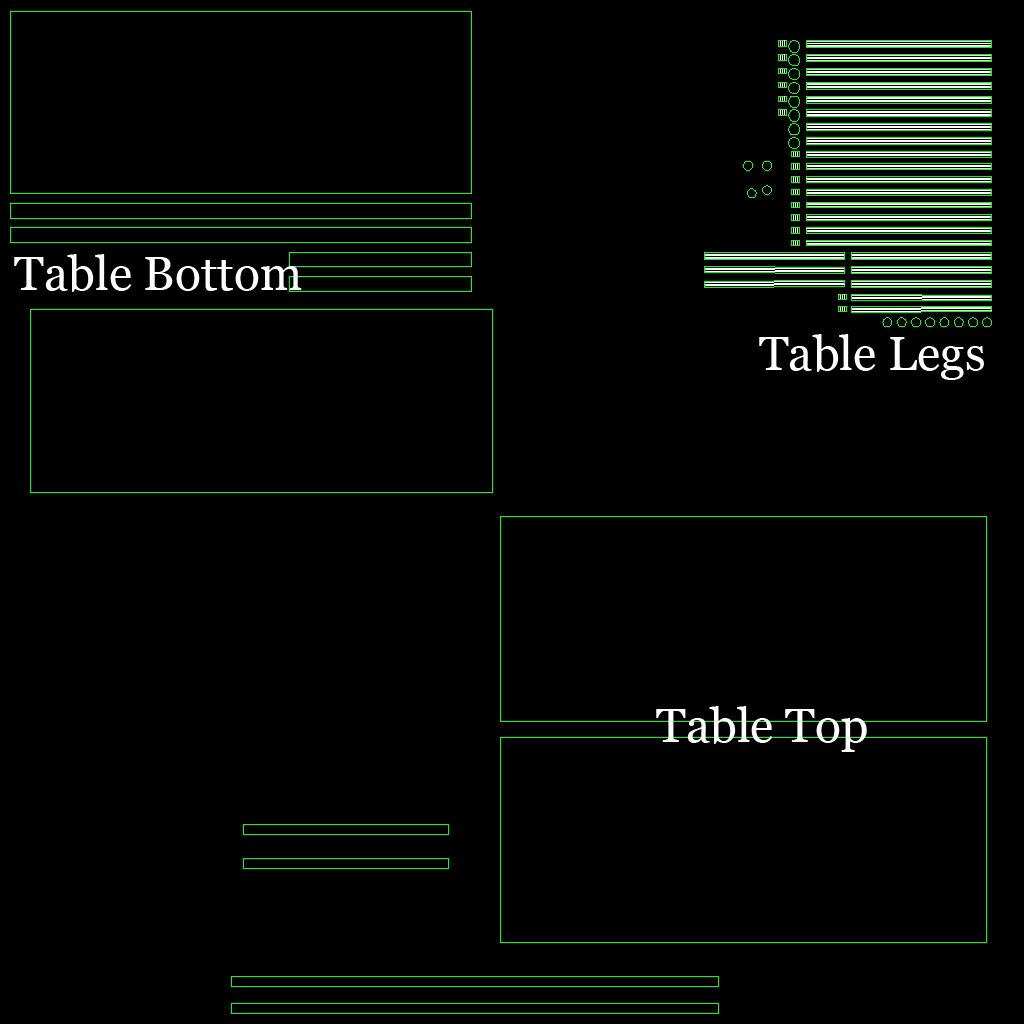
<style>
.page{position:relative;width:1024px;height:1024px;background:#000000}
.page>*{position:absolute;margin:0}
.t1{font:48px "Georgia";color:#ffffff}
</style>
<div class="page">
<p class="t1" style="left:14px;top:254px;width:288px;height:38px">Table Bottom</p>
<p class="t1" style="left:759px;top:334px;width:225px;height:46px">Table Legs</p>
<p class="t1" style="left:656px;top:706px;width:211px;height:46px">Table Top</p>
</div>
